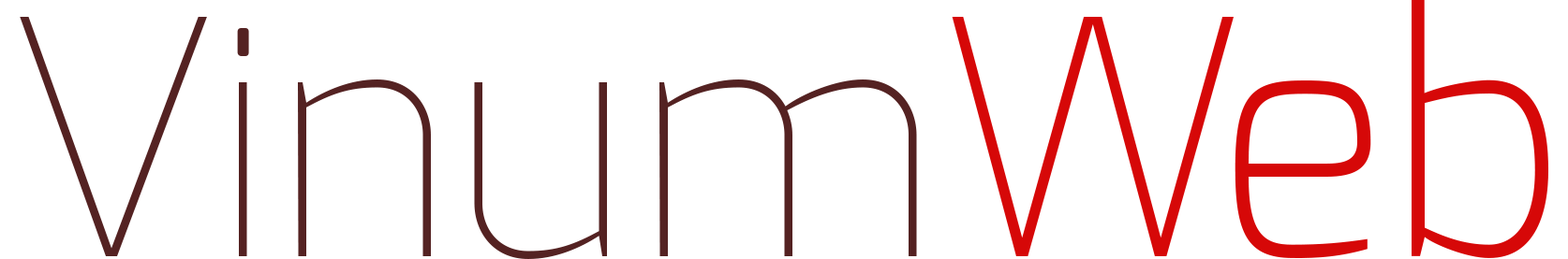
<style>
.page{position:relative;width:1568px;height:259px;background:#ffffff}
.page>*{position:absolute;margin:0}
.t1{font:327.8px "Exo-ExtraLight";letter-spacing:-0.1em;color:#d60808;scale:0.75 1}
.t2{font:327.8px "Exo-ExtraLight";color:#d60808}
.t3{font:327.8px "Exo-Thin";color:#542222}
</style>
<div class="page">
<p class="t1" style="left:952px;top:0px;width:596px;height:259px">VV<span class="t2">eb</span></p>
<p class="t3" style="left:20px;top:17px;width:897px;height:242px">Vinum</p>
</div>
